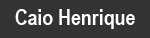
<style>
.page{position:relative;width:150px;height:38px;background:#333333}
.page>*{position:absolute;margin:0}
.t1{font:21.5px "ArialNarrow-Bold";color:#ffffff}
</style>
<div class="page">
<p class="t1" style="left:15px;top:9px;width:120px;height:20px">Caio Henrique</p>
</div>
